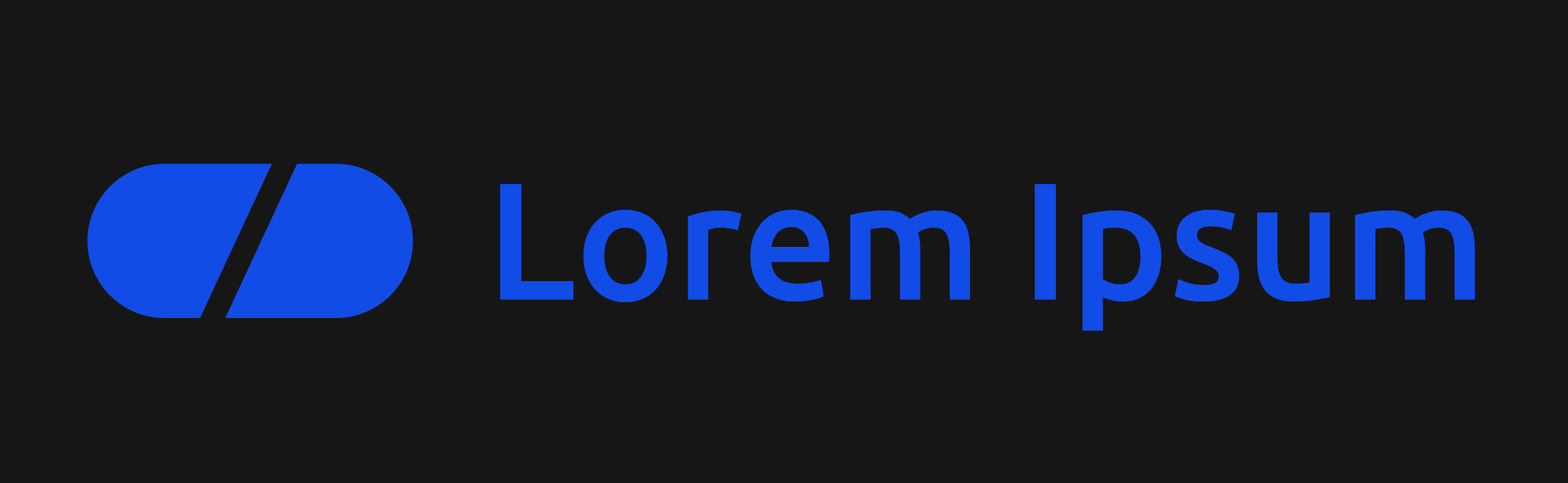
<style>
.page{position:relative;width:1568px;height:483px;background:#161616}
.page>*{position:absolute;margin:0}
.t1{font:166.8px "Ubuntu-Medium";color:#124ce6}
</style>
<div class="page">
<p class="t1" style="left:500px;top:184px;width:975px;height:147px">Lorem Ipsum</p>
</div>
